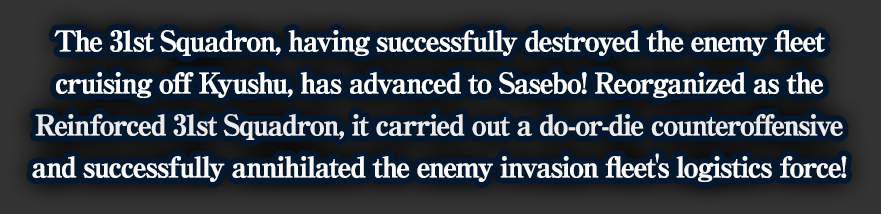
<style>
.page{position:relative;width:881px;height:214px;background:#03172f}
.page>*{position:absolute;margin:0}
.t1{font:28px/42px "RyuminPro-ExBold";letter-spacing:-0.08em;color:#ffffff;font-weight:bold}
</style>
<div class="page">
<p class="t1" style="left:32px;top:30px;width:815px;height:152px;text-align:center">The 31st Squadron, having successfully destroyed the enemy fleet<br>cruising off Kyushu, has advanced to Sasebo! Reorganized as the<br>Reinforced 31st Squadron, it carried out a do-or-die counteroffensive<br>and successfully annihilated the enemy invasion fleet's logistics force!</p>
</div>
